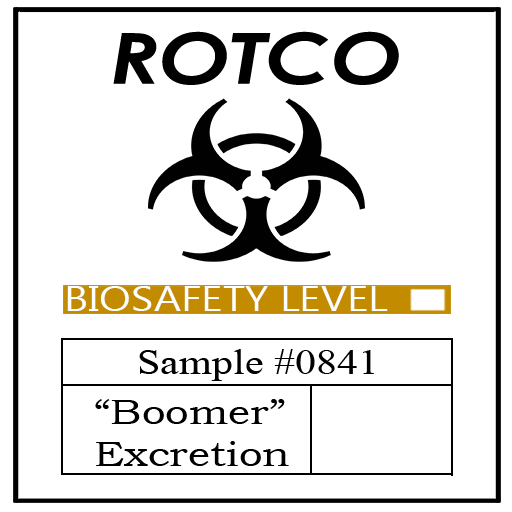
<style>
.page{position:relative;width:512px;height:512px;background:#ffffff}
.page>*{position:absolute;margin:0}
.t1{font:70.1px "CenturyGothic-BoldItalic";color:#000000;scale:1.2 1}
.t2{font:35.1px "MyanmarText";color:#ffffff;scale:1.2 1}
.t3{font:35.1px "TimesNewRomanPSMT";color:#000000;scale:1.2 1}
.t4{font:35.1px "BookmanOldStyle";color:#000000;scale:1.2 1}
</style>
<div class="page">
<p class="t1" style="left:113px;top:31px;width:286px;height:54px">ROTCO</p>
<p class="t2" style="left:67px;top:286px;width:321px;height:25px">BIOSAFETY LEVEL</p>
<p class="t3" style="left:139px;top:349px;width:235px;height:32px">Sample #0841</p>
<p class="t4" style="left:95px;top:399px;width:194px;height:67px">“Boomer”<br>Excretion</p>
</div>
